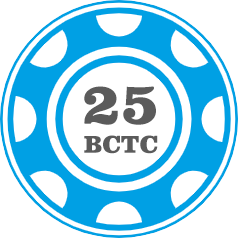
<style>
.page{position:relative;width:238px;height:238px;background:#ffffff}
.page>*{position:absolute;margin:0}
.t1{font:60px "ClarendonBT-Black";color:#5b5b5b}
.t2{font:25px "ClarendonBT-Black";color:#5b5b5b}
</style>
<div class="page">
<p class="t1" style="left:84px;top:86px;width:72px;height:39px">25</p>
<p class="t2" style="left:84px;top:135px;width:74px;height:19px">BCTC</p>
</div>
